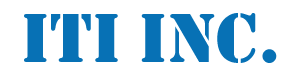
<style>
.page{position:relative;width:300px;height:84px;background:#ffffff}
.page>*{position:absolute;margin:0}
.t1{font:72px "Stencil";color:#0771b5}
</style>
<div class="page">
<p class="t1" style="left:24px;top:13px;width:253px;height:50px">ITI INC.</p>
</div>
